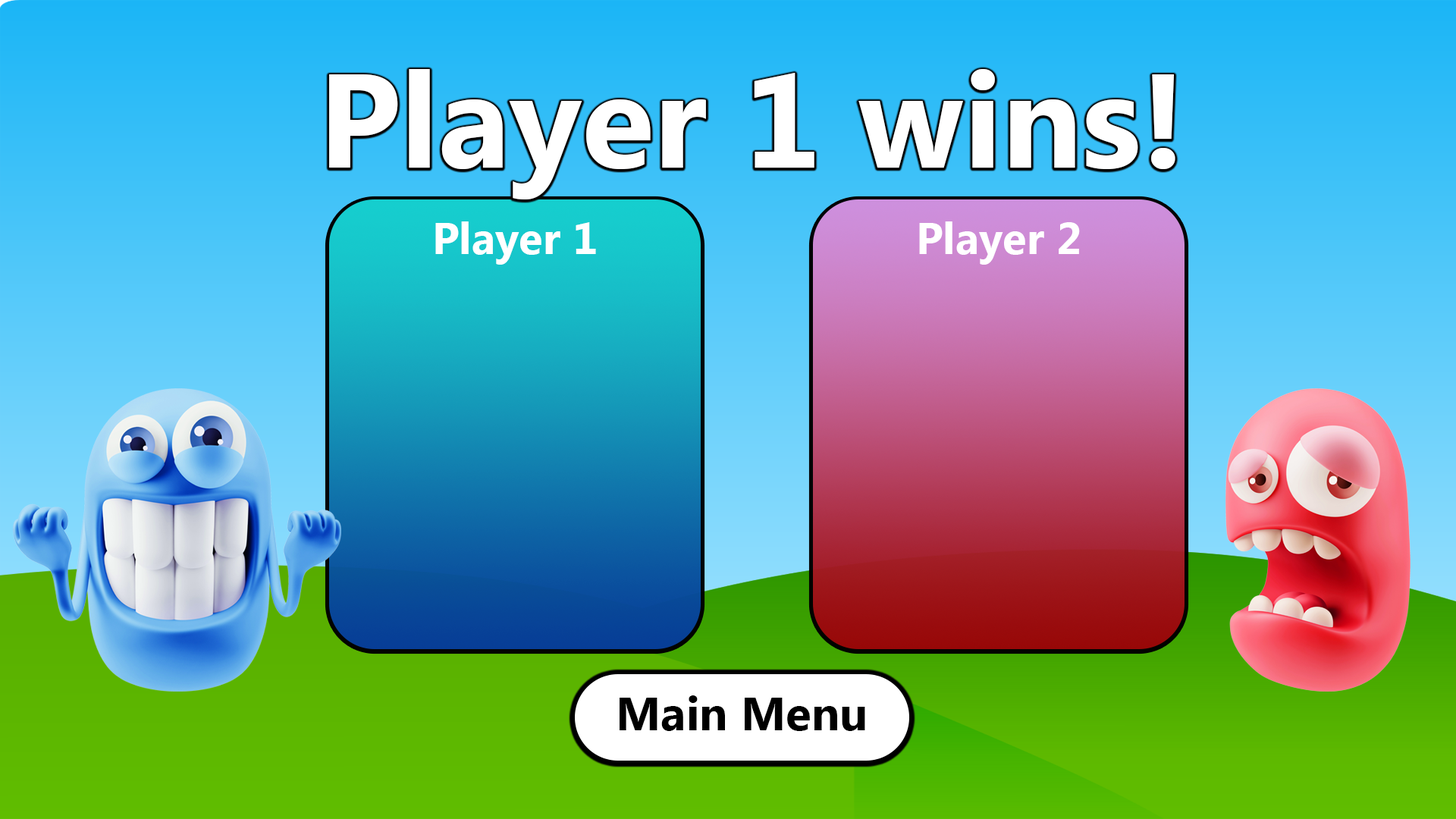
<style>
.page{position:relative;width:1456px;height:819px}
.page>*{position:absolute;margin:0}
.t1{font:133.5px "MyanmarText-Bold";color:#ffffff}
.t2{font:44px "MyanmarText-Bold";color:#ffffff}
.t3{font:47px "MyanmarText-Bold";color:#000000}
</style>
<div class="page">
<p class="t1" style="left:329px;top:69px;width:846px;height:130px">Player 1 wins!</p>
<p class="t2" style="left:435px;top:221px;width:161px;height:44px">Player 1</p>
<p class="t2" style="left:919px;top:221px;width:161px;height:44px">Player 2</p>
<p class="t3" style="left:620px;top:695px;width:245px;height:36px">Main Menu</p>
</div>
